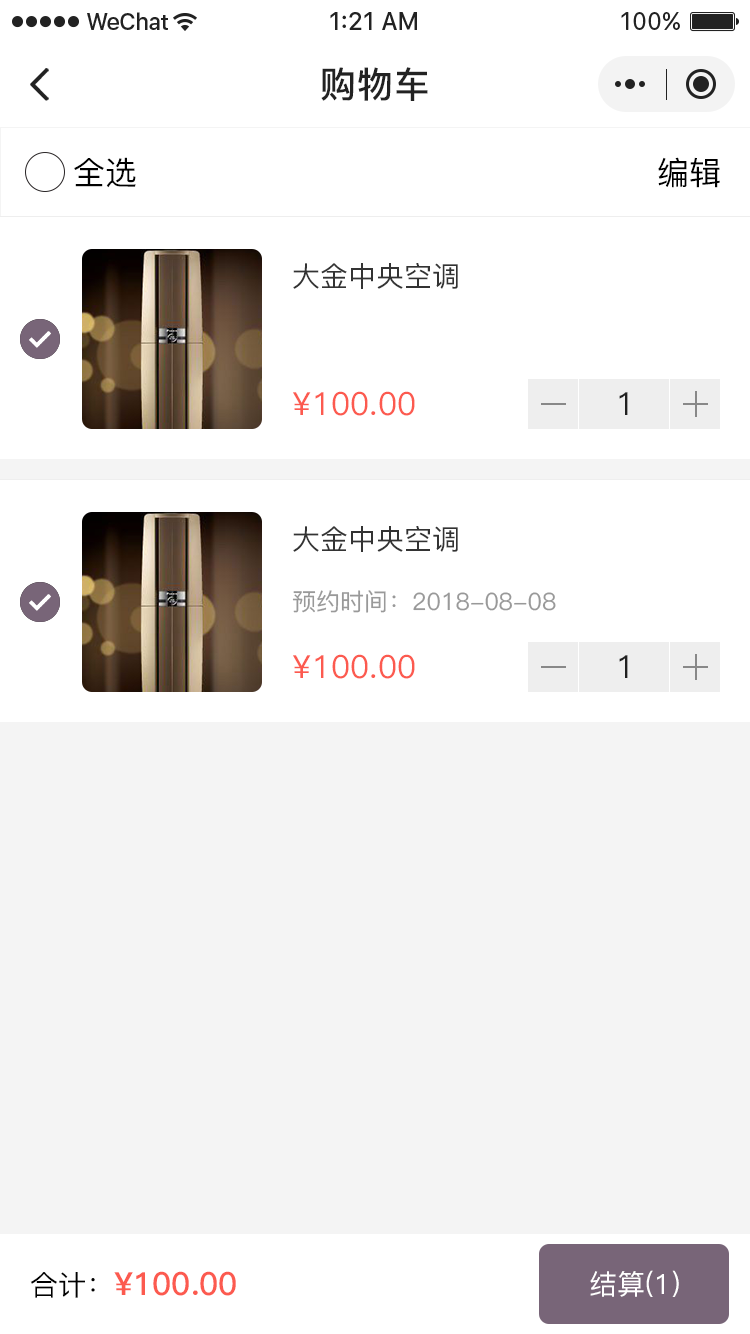
<style>
.page{position:relative;width:750px;height:1334px;background:#ffffff}
.page>*{position:absolute;margin:0}
.t1{font:36px "PingFang-SC-Bold";letter-spacing:0.028em;color:#222222}
.t2{font:32px "PingFang-SC-Medium";color:#010101}
.t3{font:32px "PingFang-SC-Medium";color:#000000}
.t4{font:28px "PingFang-SC-Medium";color:#333333;text-transform:uppercase}
.t5{font:32px "PingFang-SC-Medium";color:#fc5a4f;text-transform:uppercase}
.t6{font:32px "PingFang-SC-Medium";color:#202020}
.t7{font:24px "PingFang-SC-Medium";color:#999999;text-transform:uppercase}
.t8{font:32px "PingFang-SC-Bold";color:#fc5a4f}
.t9{font:28px "PingFang-SC-Medium";color:#000000}
.t10{font:28px "PingFang-SC-Medium";color:#ffffff}
</style>
<div class="page">
<p class="t1" style="left:321px;top:67px;width:107px;height:34px">购物车</p>
<p class="t2" style="left:74px;top:157px;width:62px;height:31px">全选</p>
<p class="t3" style="left:658px;top:157px;width:62px;height:31px">编辑</p>
<p class="t4" style="left:293px;top:263px;width:165px;height:26px">大金中央空调</p>
<p class="t5" style="left:293px;top:391px;width:122px;height:25px">¥100.00</p>
<p class="t6" style="left:619px;top:392px;width:9px;height:23px">1</p>
<p class="t4" style="left:293px;top:526px;width:165px;height:26px">大金中央空调</p>
<p class="t7" style="left:292px;top:590px;width:264px;height:23px">预约时间：2018-08-08</p>
<p class="t5" style="left:293px;top:654px;width:122px;height:25px">¥100.00</p>
<p class="t6" style="left:619px;top:655px;width:9px;height:23px">1</p>
<p class="t8" style="left:30px;top:1271px;width:206px;height:27px"><span class="t9">合计：</span>¥100.00</p>
<p class="t10" style="left:590px;top:1270px;width:89px;height:27px">结算(1)</p>
</div>
